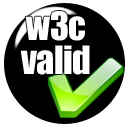
<style>
.page{position:relative;width:128px;height:128px;background:#ffffff}
.page>*{position:absolute;margin:0}
.t1{font:36px/2.6px "Impact";letter-spacing:-0.02em;color:#ffffff}
</style>
<div class="page">
<p class="t1" style="left:20px;top:11px;width:70px;height:64px;text-align:center">w3c<br><br><br><br><br><br><br><br><br><br><br><br><br>valid</p>
</div>
